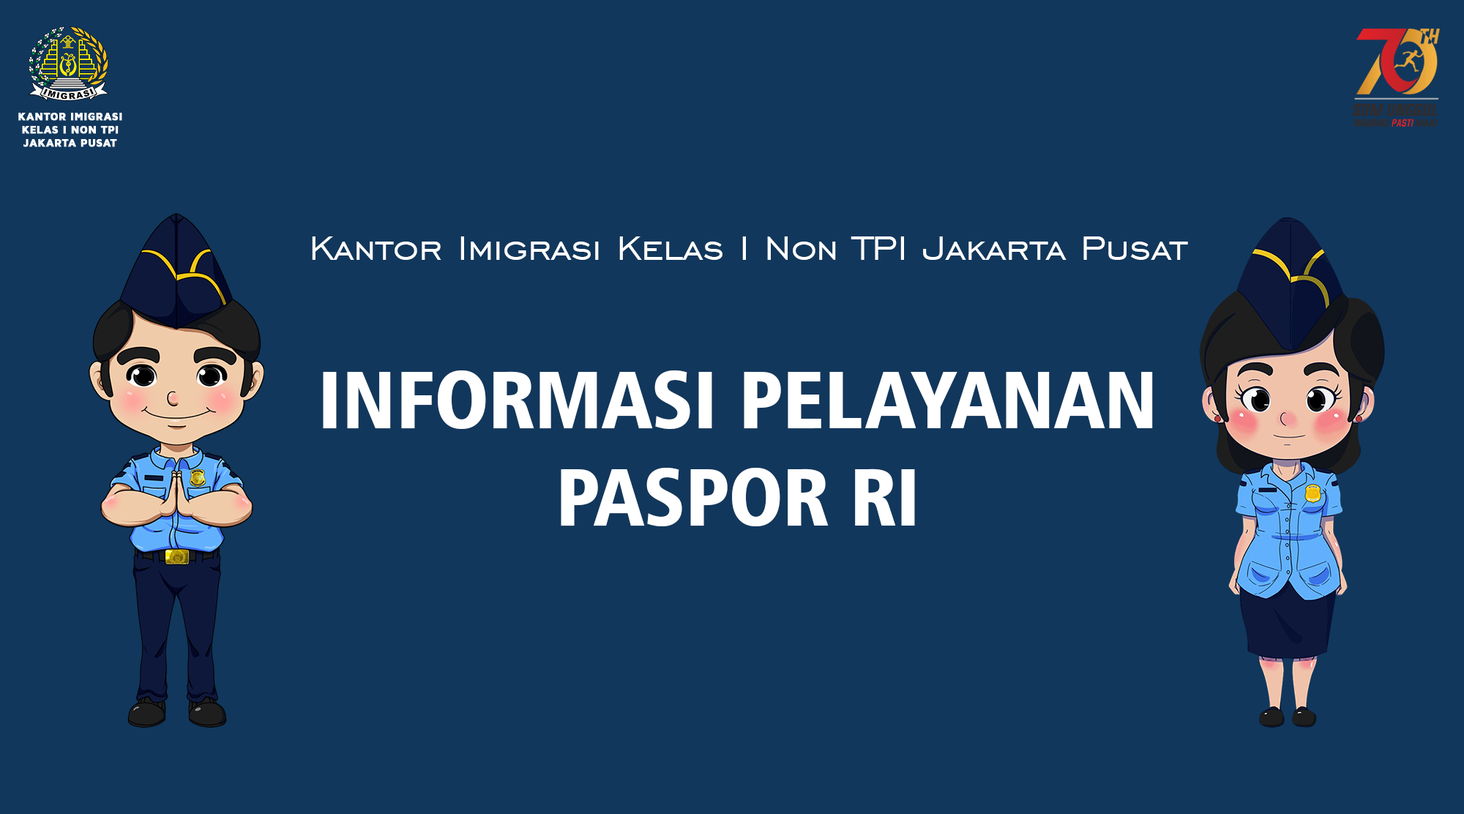
<style>
.page{position:relative;width:1464px;height:814px;background:#11375c}
.page>*{position:absolute;margin:0}
.t1{font:43.9px "EngraversGothicBT-Regular";color:#ffffff}
.t2{font:81.1px "Humanist777BT-BlackCondensedB";color:#ffffff}
</style>
<div class="page">
<p class="t1" style="left:312px;top:237px;width:876px;height:23px">Kantor Imigrasi Kelas I Non TPI Jakarta Pusat</p>
<p class="t2" style="left:323px;top:371px;width:830px;height:155px;text-align:center">INFORMASI PELAYANAN<br>PASPOR RI</p>
</div>
